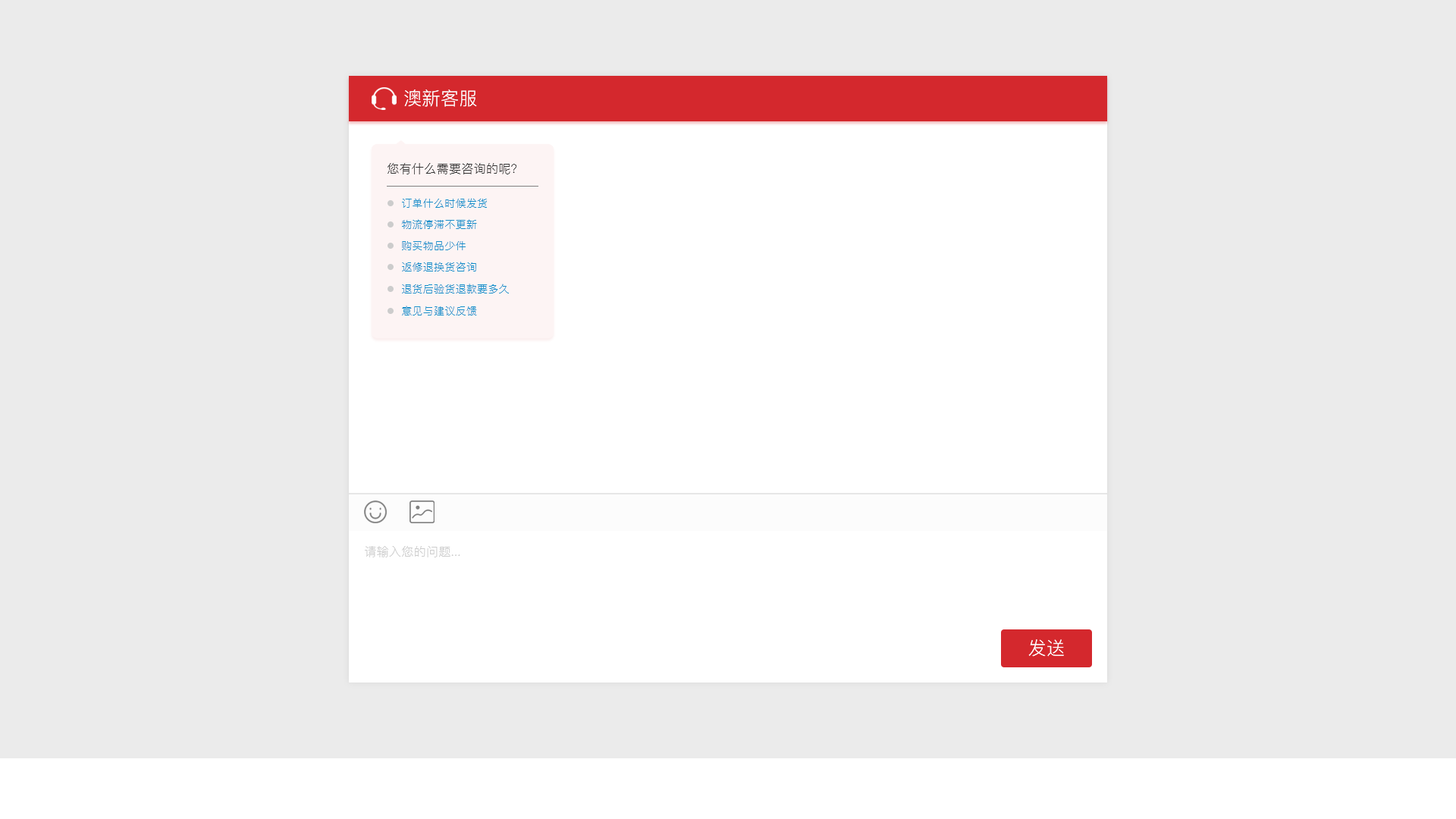
<style>
.page{position:relative;width:1456px;height:819px;background:#ebebeb}
.page>*{position:absolute;margin:0}
.t1{font:18.2px "PingFang-SC-Regular";letter-spacing:0.02em;color:#ffffff}
.t2{font:12.1px "PingFang-SC-Regular";letter-spacing:0.02em;color:#333333}
.t3{font:10.6px "PingFang-SC-Regular";letter-spacing:0.02em;color:#138ecb}
.t4{font:12.1px "PingFang-SC-Regular";letter-spacing:0.02em;color:#cccccc}
</style>
<div class="page">
<p class="t1" style="left:404px;top:89px;width:73px;height:18px">澳新客服</p>
<p class="t2" style="left:388px;top:163px;width:128px;height:11px">您有什么需要咨询的呢？</p>
<p class="t3" style="left:402px;top:198px;width:85px;height:10px">订单什么时候发货</p>
<p class="t3" style="left:401px;top:219px;width:76px;height:10px">物流停滞不更新</p>
<p class="t3" style="left:402px;top:241px;width:64px;height:9px">购买物品少件</p>
<p class="t3" style="left:402px;top:262px;width:74px;height:9px">返修退换货咨询</p>
<p class="t3" style="left:402px;top:284px;width:107px;height:9px">退货后验货退款要多久</p>
<p class="t3" style="left:402px;top:306px;width:75px;height:9px">意见与建议反馈</p>
<p class="t4" style="left:365px;top:546px;width:95px;height:11px">请输入您的问题...</p>
<p class="t1" style="left:1028px;top:639px;width:36px;height:18px">发送</p>
</div>
